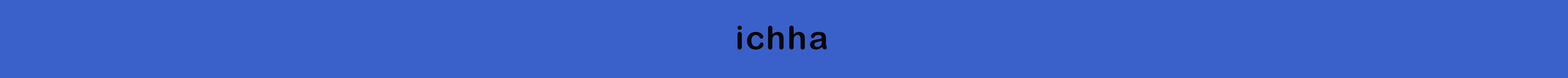
<style>
.page{position:relative;width:1568px;height:78px;background:#3a60ca}
.page>*{position:absolute;margin:0}
.t1{font:32.7px "ArialRoundedMTBold";letter-spacing:0.05em;color:#080707}
</style>
<div class="page">
<p class="t1" style="left:737px;top:26px;width:90px;height:24px">ichha</p>
</div>
